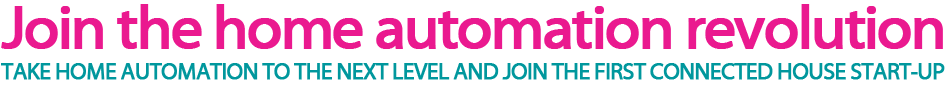
<style>
.page{position:relative;width:946px;height:96px;background:#ffffff}
.page>*{position:absolute;margin:0}
.t1{font:62.2px "MyriadWebPro";letter-spacing:-0.055em;color:#ea198f;font-weight:bold}
.t2{font:23.3px "MyriadWebPro";letter-spacing:-0.055em;color:#00979d;font-weight:bold}
</style>
<div class="page">
<p class="t1" style="left:1px;top:4px;width:942px;height:45px">Join the home automation revolution</p>
<p class="t2" style="left:1px;top:63px;width:944px;height:17px">TAKE HOME AUTOMATION TO THE NEXT LEVEL AND JOIN THE FIRST CONNECTED HOUSE START-UP</p>
</div>
